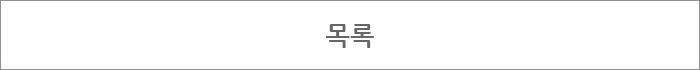
<style>
.page{position:relative;width:700px;height:70px;background:#ffffff}
.page>*{position:absolute;margin:0}
.t1{font:26px "NanumGothicBold";color:#666666}
</style>
<div class="page">
<p class="t1" style="left:326px;top:24px;width:48px;height:24px">목록</p>
</div>
